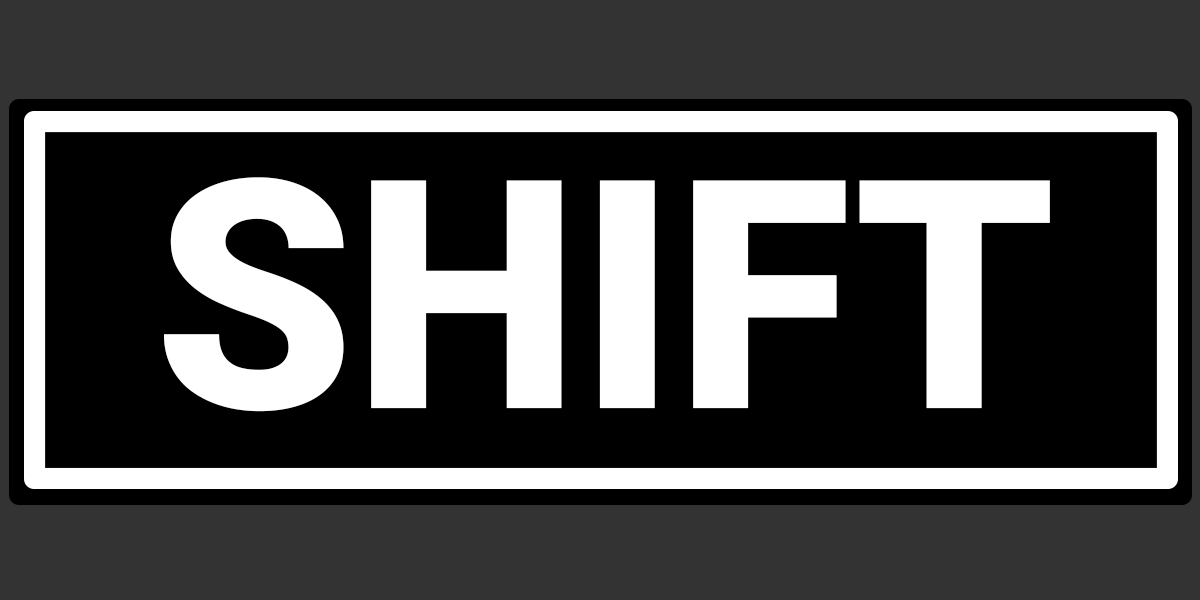
<style>
.page{position:relative;width:1200px;height:600px;background:#000000}
.page>*{position:absolute;margin:0}
.t1{font:320px "Roboto-Black";color:#ffffff}
</style>
<div class="page">
<p class="t1" style="left:164px;top:177px;width:886px;height:235px">SHIFT</p>
</div>
